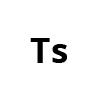
<style>
.page{position:relative;width:100px;height:100px;background:#ffffff}
.page>*{position:absolute;margin:0}
.t1{font:35px "OpenSans-Bold";color:#000000}
</style>
<div class="page">
<p class="t1" style="left:30px;top:38px;width:37px;height:25px">Ts</p>
</div>
